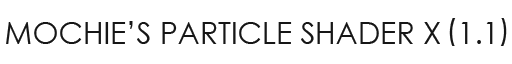
<style>
.page{position:relative;width:512px;height:64px;background:#ffffff}
.page>*{position:absolute;margin:0}
.t1{font:30px "CenturyGothic";color:#161616}
</style>
<div class="page">
<p class="t1" style="left:6px;top:21px;width:487px;height:23px">MOCHIE’S PARTICLE SHADER X  1.1</p>
</div>
